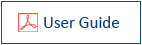
<style>
.page{position:relative;width:142px;height:45px;background:#ffffff}
.page>*{position:absolute;margin:0}
.t1{font:17px "Calibri";color:#053e7e}
</style>
<div class="page">
<p class="t1" style="left:44px;top:16px;width:75px;height:12px">User Guide</p>
</div>
